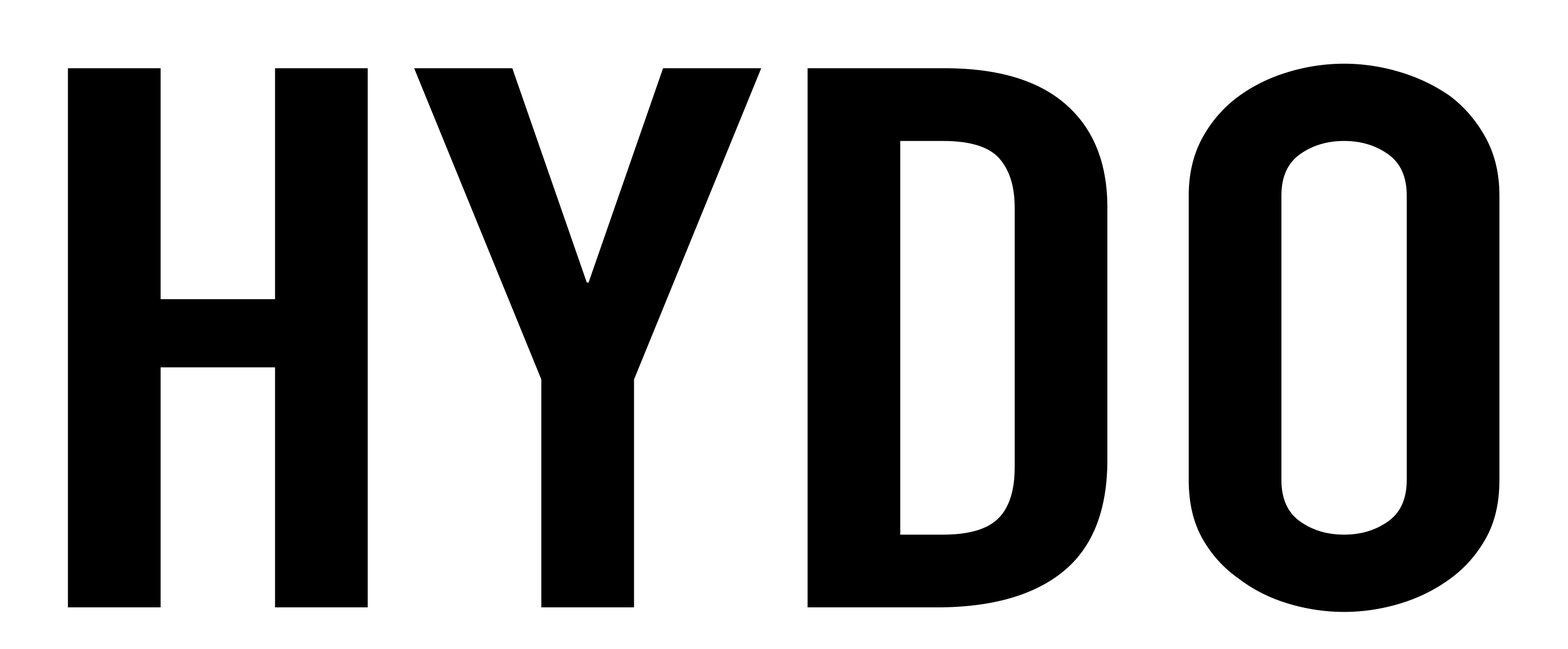
<style>
.page{position:relative;width:1568px;height:649px;background:#ffffff}
.page>*{position:absolute;margin:0}
.t1{font:757px "DINCondensed-Bold";color:#000000;scale:1.2 1}
</style>
<div class="page">
<p class="t1" style="left:68px;top:63px;width:1432px;height:549px">HYDO</p>
</div>
